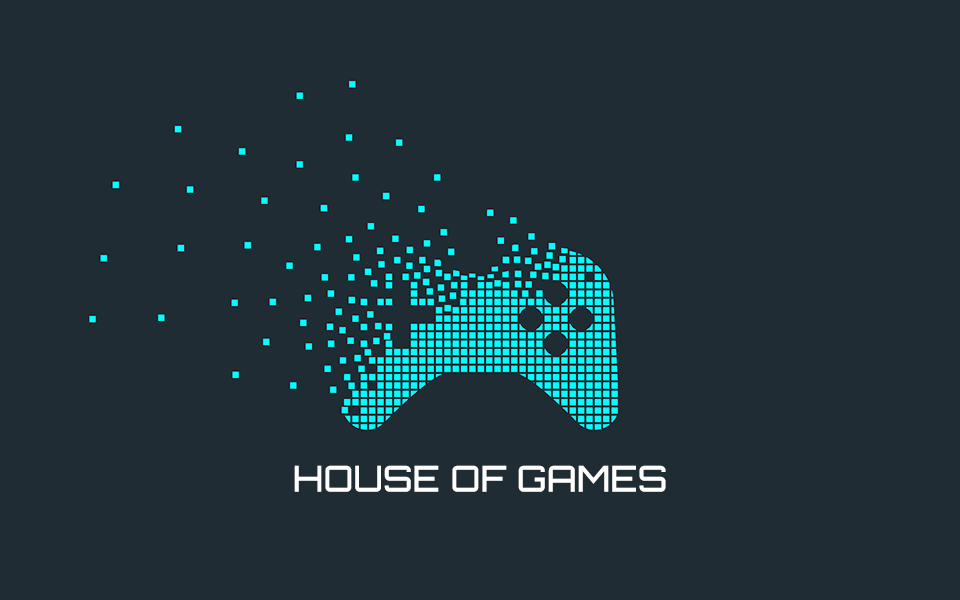
<style>
.page{position:relative;width:960px;height:600px;background:#1f2c34}
.page>*{position:absolute;margin:0}
.t1{font:36px "Orbitron-Medium";color:#ffffff}
</style>
<div class="page">
<p class="t1" style="left:294px;top:465px;width:372px;height:27px">HOUSE OF GAMES</p>
</div>
